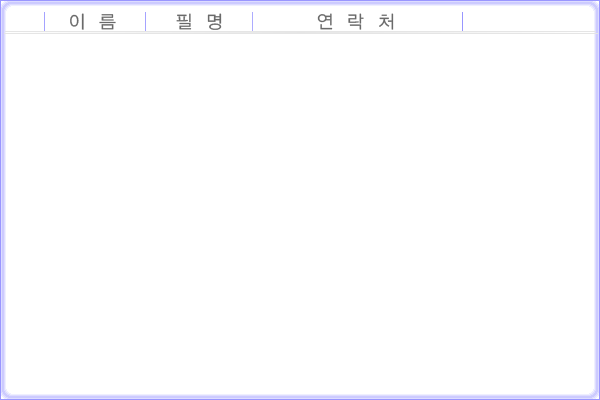
<style>
.page{position:relative;width:600px;height:400px;background:#ffffff}
.page>*{position:absolute;margin:0}
.t1{font:18px "YGO125";color:#6a6a6a}
</style>
<div class="page">
<p class="t1" style="left:70px;top:13px;width:46px;height:17px">이  름</p>
<p class="t1" style="left:176px;top:13px;width:46px;height:17px">필  명</p>
<p class="t1" style="left:317px;top:13px;width:77px;height:17px">연  락  처</p>
</div>
